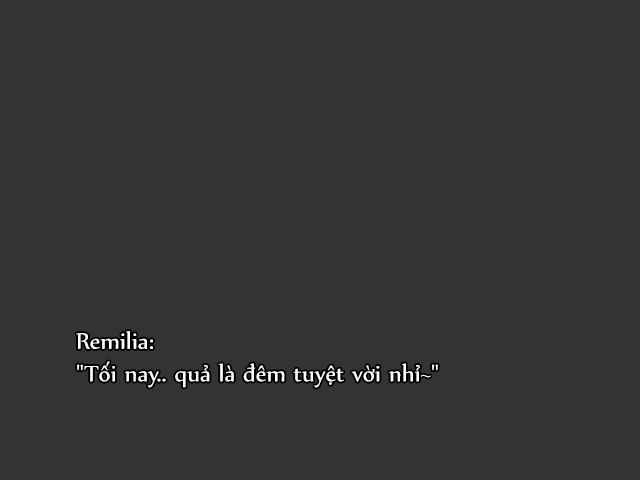
<style>
.page{position:relative;width:640px;height:480px;background:#333333}
.page>*{position:absolute;margin:0}
.t1{font:27px "UTM-Nyala";color:#ffffff}
</style>
<div class="page">
<p class="t1" style="left:76px;top:331px;width:362px;height:57px">Remilia:<br>"Tối nay.. quả là đêm tuyệt vời nhỉ~"</p>
</div>
